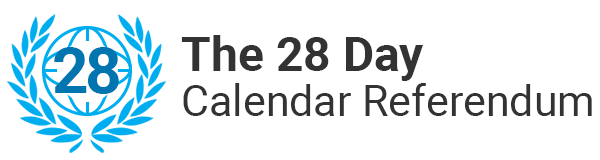
<style>
.page{position:relative;width:600px;height:160px;background:#ffffff}
.page>*{position:absolute;margin:0}
.t1{font:42.9px/44.2px "Roboto-Regular";color:#333333}
.t2{font:48px/44.2px "Roboto-Bold";color:#333333}
.t3{font:63.7px "Roboto-Bold";color:#0075b0}
</style>
<div class="page">
<p class="t1" style="left:181px;top:35px;width:411px;height:81px"><span class="t2">The 28 Day <br></span>Calendar Referendum</p>
<p class="t3" style="left:54px;top:47px;width:65px;height:47px">28</p>
</div>
